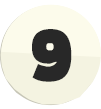
<style>
.page{position:relative;width:101px;height:109px;background:#f4f3e1}
.page>*{position:absolute;margin:0}
.t1{font:72px "MovaviGrotesqueBlack";color:#282828}
</style>
<div class="page">
<p class="t1" style="left:32px;top:29px;width:40px;height:53px">9</p>
</div>
